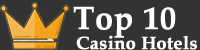
<style>
.page{position:relative;width:200px;height:50px;background:#333333}
.page>*{position:absolute;margin:0}
.t1{font:32px "PalatinoLinotype-Bold";color:#ffffff;font-weight:bold}
.t2{font:18px "PalatinoLinotype-Bold";color:#ffffff;font-weight:bold}
</style>
<div class="page">
<p class="t1" style="left:73px;top:6px;width:103px;height:32px">Top 10</p>
<p class="t2" style="left:76px;top:35px;width:121px;height:15px">Casino Hotels</p>
</div>
